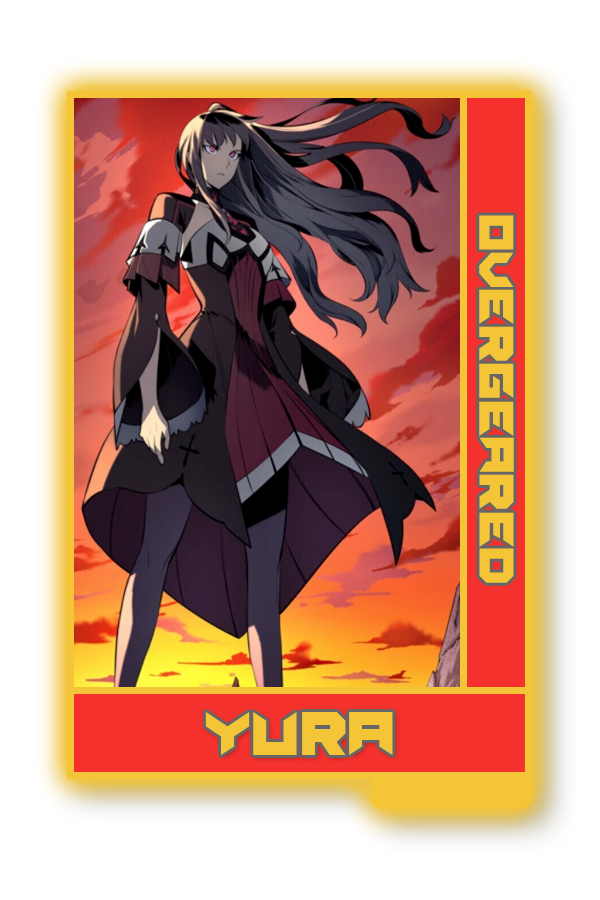
<style>
.page{position:relative;width:600px;height:900px;background:#ffffff}
.page>*{position:absolute;margin:0}
.t1{font:48.8px "Suggested-Regular";color:#f4c536}
.t2{font:62.5px "Suggested-Regular";color:#f4c536}
</style>
<div class="page">
<p class="t1" style="left:479px;top:215px;width:35px;height:368px;rotate:90deg">OVERGEARED</p>
<p class="t2" style="left:205px;top:712px;width:188px;height:43px">YURA</p>
</div>
